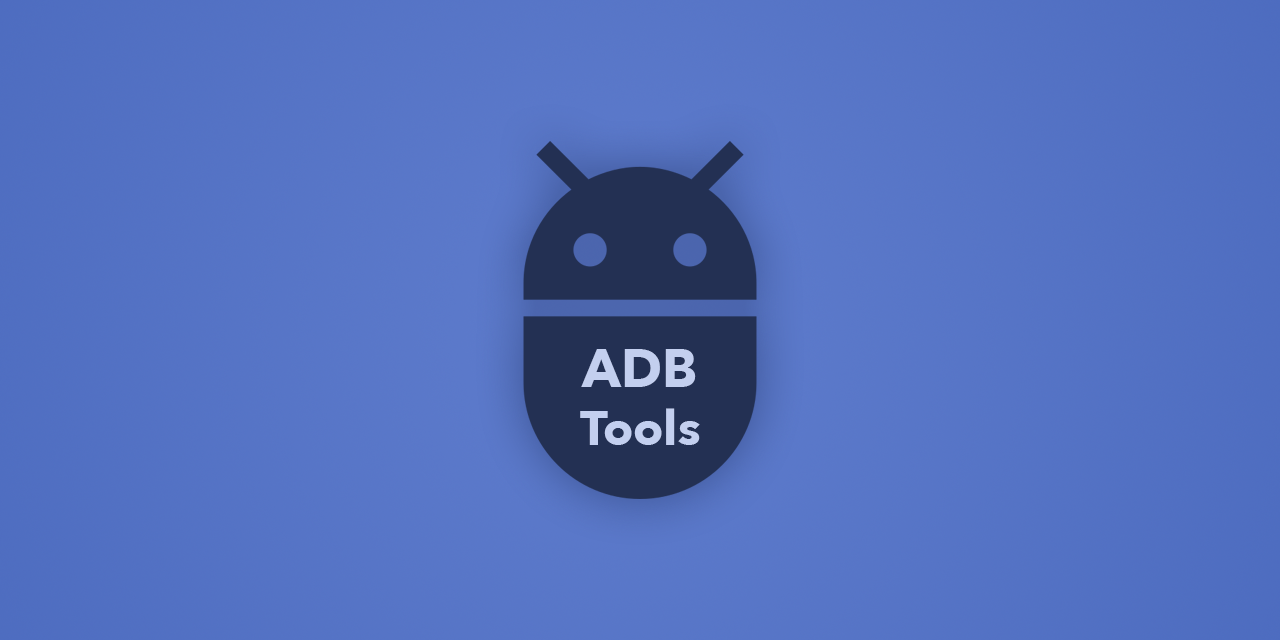
<style>
.page{position:relative;width:1280px;height:640px}
.page>*{position:absolute;margin:0}
.t1{font:48px "AvenirNext-Bold";color:#c3cfef}
.t2{font:53.3px "AvenirNext-Bold";color:#c3cfef}
</style>
<div class="page">
<p class="t1" style="left:580px;top:349px;width:120px;height:96px;text-align:center"><span class="t2">ADB<br></span>Tools</p>
</div>
